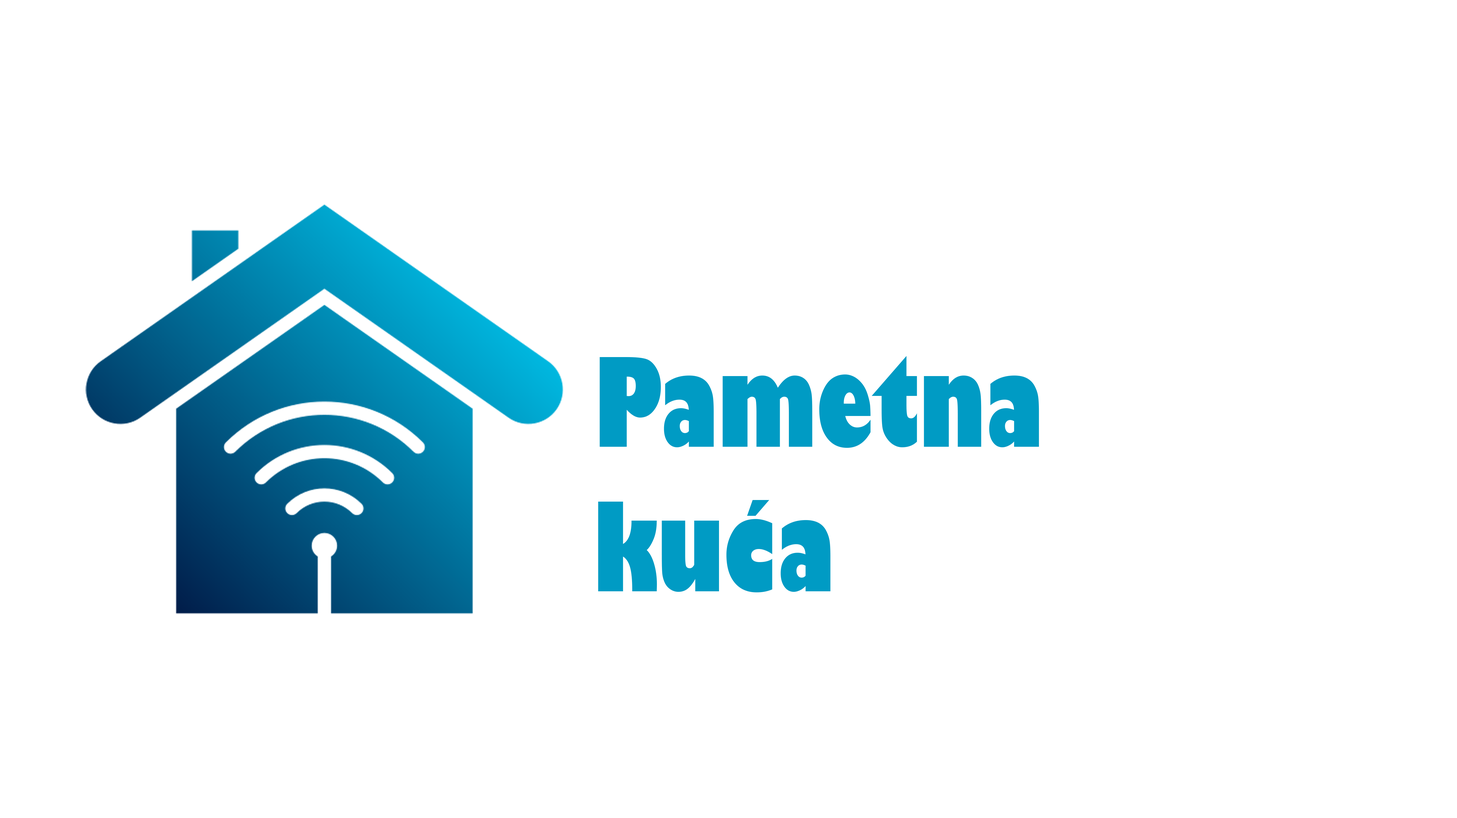
<style>
.page{position:relative;width:1457px;height:818px;background:#ffffff}
.page>*{position:absolute;margin:0}
.t1{font:120.5px "GillSans-UltraBoldCondensed";color:#009bc4}
</style>
<div class="page">
<p class="t1" style="left:598px;top:356px;width:441px;height:237px">Pametna<br>kuća</p>
</div>
